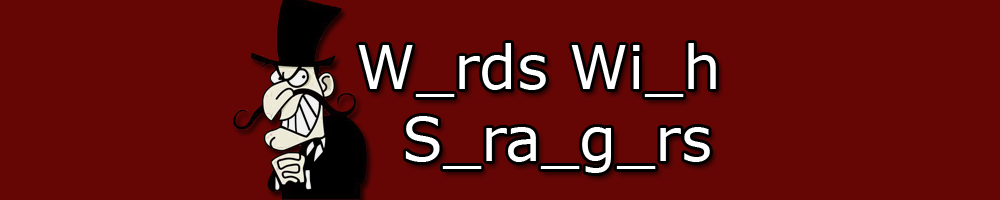
<style>
.page{position:relative;width:1000px;height:200px;background:#650605}
.page>*{position:absolute;margin:0}
.t1{font:60px "MSReferenceSansSerif";color:#ffffff}
</style>
<div class="page">
<p class="t1" style="left:358px;top:43px;width:358px;height:130px;text-align:center">W_rds Wi_h<br> S_ra_g_rs</p>
</div>
